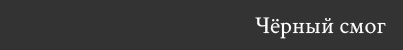
<style>
.page{position:relative;width:403px;height:50px;background:#333333}
.page>*{position:absolute;margin:0}
.t1{font:24px "CrimsonText-Regular";color:#ffffff}
</style>
<div class="page">
<p class="t1" style="left:255px;top:17px;width:131px;height:22px">Чёрный смог</p>
</div>
